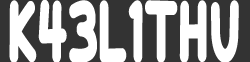
<style>
.page{position:relative;width:250px;height:62px;background:#333333}
.page>*{position:absolute;margin:0}
.t1{font:87.1px "CandyBeans";color:#ffffff;font-weight:bold;scale:0.6 1}
</style>
<div class="page">
<p class="t1" style="left:9px;top:0px;width:230px;height:63px">K43L1THU</p>
</div>
